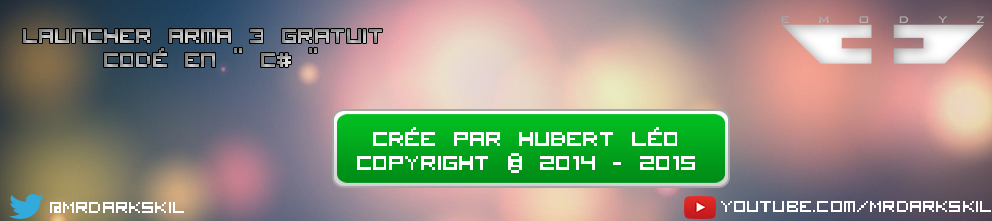
<style>
.page{position:relative;width:992px;height:221px}
.page>*{position:absolute;margin:0}
.t1{font:27px/24px "VisitorTT1BRK"}
.t2{font:22px "VisitorTT1BRK";color:#ffffff}
</style>
<div class="page">
<p class="t1" style="left:23px;top:29px;width:359px;height:38px;text-align:center">Launcher arma 3 gratuit <br>codé en “ C# ”</p>
<p class="t2" style="left:50px;top:202px;width:134px;height:11px">@Mrdarkskil</p>
<p class="t2" style="left:721px;top:201px;width:270px;height:11px">youtube.com/Mrdarkskil</p>
</div>
